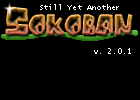
<style>
.page{position:relative;width:140px;height:100px;background:#000000}
.page>*{position:absolute;margin:0}
.t1{font:8px "LucidaConsole";letter-spacing:-0.025em;color:#ffffff}
</style>
<div class="page">
<p class="t1" style="left:40px;top:4px;width:79px;height:6px">Still Yet Another</p>
<p class="t1" style="left:94px;top:48px;width:37px;height:6px">v. 2.0.1</p>
</div>
